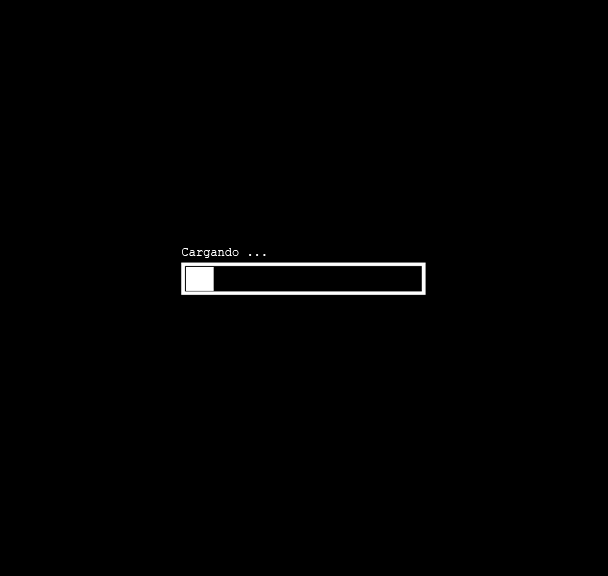
<style>
.page{position:relative;width:608px;height:576px;background:#000000}
.page>*{position:absolute;margin:0}
.t1{font:12px "CourierNewPSMT";color:#ffffff}
</style>
<div class="page">
<p class="t1" style="left:182px;top:248px;width:84px;height:10px">Cargando ...</p>
</div>
